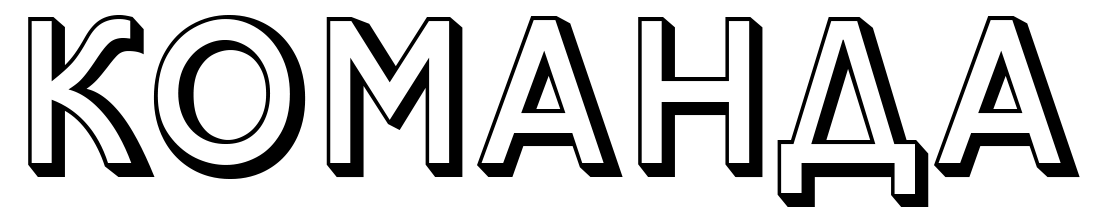
<style>
.page{position:relative;width:1099px;height:223px;background:#ffffff}
.page>*{position:absolute;margin:0}
.t1{font:212px "GillSansNovaShadowed-Outln";color:#000000;scale:0.96 1}
</style>
<div class="page">
<p class="t1" style="left:28px;top:15px;width:1052px;height:192px">Команда</p>
</div>
